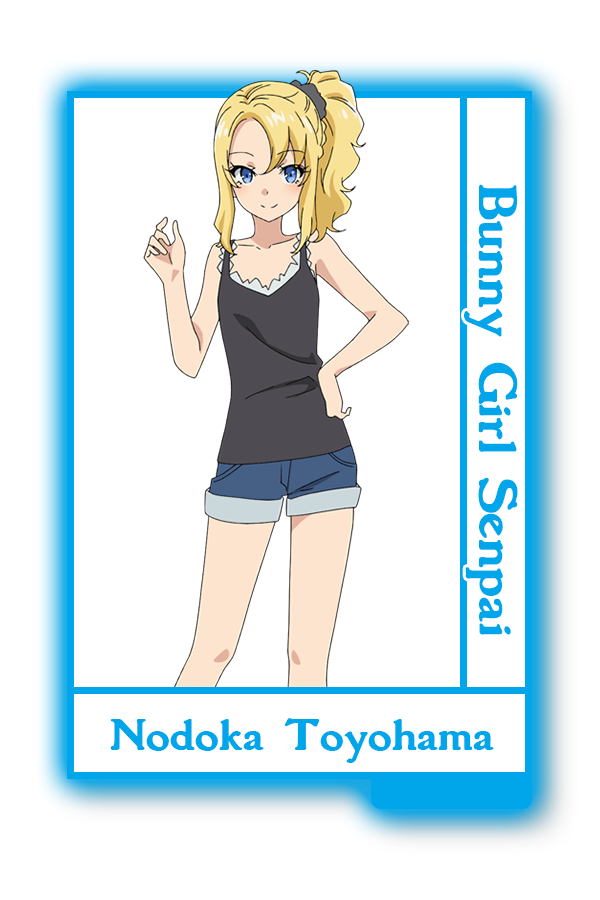
<style>
.page{position:relative;width:600px;height:900px;background:#ffffff}
.page>*{position:absolute;margin:0}
.t1{font:48.8px "Grantham-Bold";color:#0ba3e1}
.t2{font:40.6px "Grantham-Bold";color:#0ba3e1}
</style>
<div class="page">
<p class="t1" style="left:464px;top:184px;width:54px;height:451px;rotate:90deg">Bunny Girl Senpai</p>
<p class="t2" style="left:110px;top:718px;width:384px;height:45px">Nodoka Toyohama</p>
</div>
